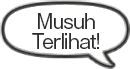
<style>
.page{position:relative;width:130px;height:69px;background:#ffffff}
.page>*{position:absolute;margin:0}
.t1{font:19px/20px "GothicMB101Pro-Regular";letter-spacing:-0.04em;color:#2a2a2a}
</style>
<div class="page">
<p class="t1" style="left:32px;top:13px;width:67px;height:36px;text-align:center">Musuh<br>Terlihat!</p>
</div>
